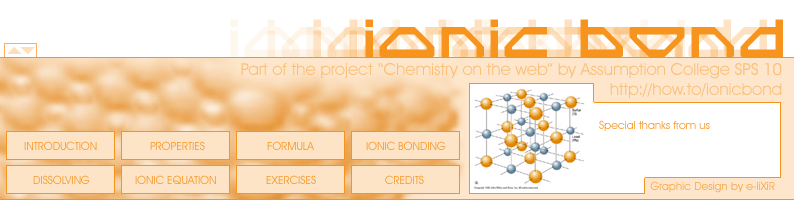
<style>
.page{position:relative;width:794px;height:200px;background:#ffffff}
.page>*{position:absolute;margin:0}
.t1{font:50px "SpyLord"}
.t2{font:50px "SpyLord";color:#f7941d}
.t3{font:16.7px "AvantGardeITCbyBT-Book";color:#fabf78}
.t4{font:11.1px "AvantGardeITCbyBT-Book";color:#f7941d}
.t5{font:11.1px "AvantGardeITCbyBT-Book"}
.t6{font:11.1px "AvantGardeITCbyBT-Book";color:#f8a440}
</style>
<div class="page">
<p class="t1" style="left:313px;top:19px;width:418px;height:38px">IONIC bond</p>
<p class="t1" style="left:349px;top:19px;width:418px;height:38px">IONIC bond</p>
<p class="t2" style="left:365px;top:19px;width:418px;height:38px">IONIC bond</p>
<p class="t3" style="left:241px;top:63px;width:541px;height:35px;text-align:right">Part of the project “Chemistry on the web” by Assumption College SPS 10<br>http://how.to/ionicbond</p>
<p class="t4" style="left:599px;top:120px;width:111px;height:11px">Special thanks from us</p>
<p class="t4" style="left:24px;top:141px;width:73px;height:9px">INTRODUCTION</p>
<p class="t4" style="left:150px;top:141px;width:55px;height:9px">PROPERTIES</p>
<p class="t4" style="left:267px;top:141px;width:47px;height:9px">FORMULA</p>
<p class="t4" style="left:366px;top:141px;width:80px;height:9px">IONIC BONDING</p>
<p class="t5" style="left:33px;top:175px;width:57px;height:9px">DISSOLVING</p>
<p class="t4" style="left:135px;top:175px;width:81px;height:9px">IONIC EQUATION</p>
<p class="t5" style="left:266px;top:175px;width:50px;height:9px">EXERCISES</p>
<p class="t4" style="left:385px;top:175px;width:39px;height:9px">CREDITS</p>
<p class="t6" style="left:650px;top:181px;width:125px;height:12px">Graphic Design by e-liXiR</p>
</div>
